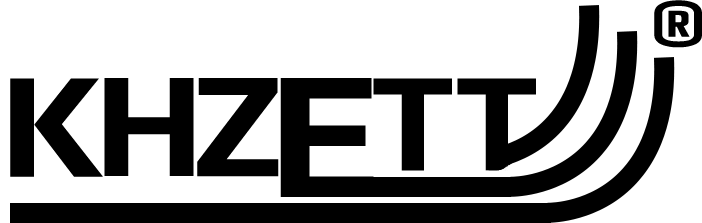
<style>
.page{position:relative;width:702px;height:223px;background:#ffffff}
.page>*{position:absolute;margin:0}
.t1{font:70px "Play-Bold";color:#000000;text-transform:uppercase}
.t2{font:151px "Play-Bold";color:#000000;text-transform:uppercase}
.t3{font:183px "Play-Bold";color:#000000;text-transform:uppercase}
</style>
<div class="page">
<p class="t1" style="left:654px;top:0px;width:48px;height:48px">®</p>
<p class="t2" style="left:10px;top:78px;width:93px;height:99px">K</p>
<p class="t2" style="left:104px;top:78px;width:90px;height:98px">h</p>
<p class="t2" style="left:197px;top:78px;width:82px;height:99px">z</p>
<p class="t3" style="left:280px;top:78px;width:94px;height:119px">e</p>
</div>
